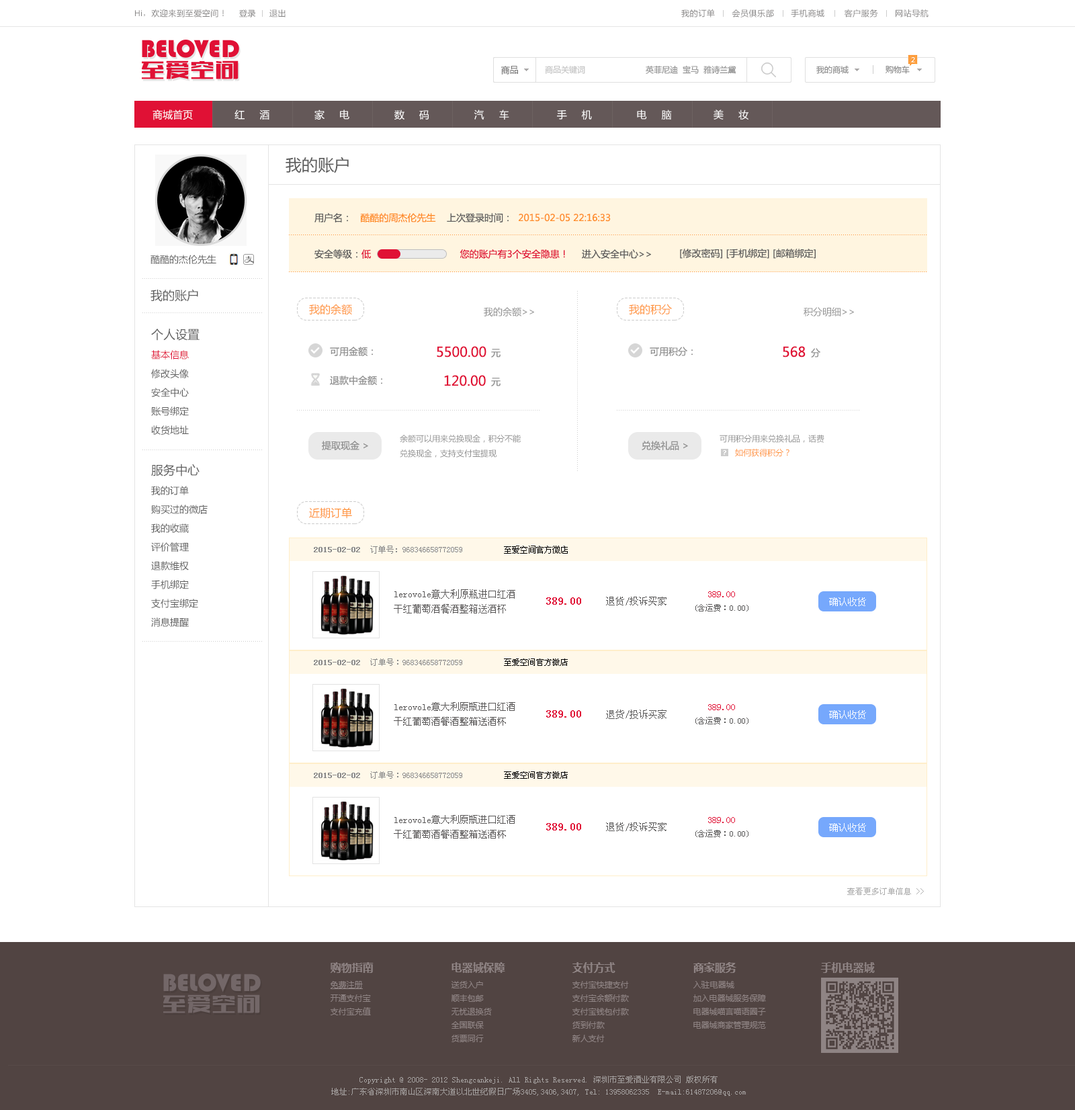
<style>
.page{position:relative;width:1075px;height:1110px;background:#ffffff}
.page>*{position:absolute;margin:0}
.t1{font:8.1px "MicrosoftYaHei";letter-spacing:0.05em;color:#858484}
.t2{font:8.1px "ArialMT";letter-spacing:0.05em;color:#858484}
.t3{font:8.1px "SimSun";letter-spacing:0.05em;color:#858484}
.t4{font:25.5px "Bauhaus93";color:#e01135}
.t5{font:24.2px "FZCTHJW--GB1-0";letter-spacing:0.025em;color:#e01135}
.t6{font:8.7px "MicrosoftYaHei";color:#7a7979}
.t7{font:8.1px "MicrosoftYaHei";color:#c4c4c4}
.t8{font:8.1px "MicrosoftYaHei";color:#8e8e8e}
.t9{font:10.1px "MicrosoftYaHei";color:#ffffff}
.t10{font:16.1px "MicrosoftYaHei";color:#5d5d5d}
.t11{font:9.4px "MicrosoftYaHei";color:#ff8c26}
.t12{font:9.4px "MicrosoftYaHei";color:#5d5d5d}
.t13{font:9.4px "MicrosoftYaHei";color:#e01135}
.t14{font:12.1px "MicrosoftYaHei";color:#5d5d5d}
.t15{font:10.7px "MicrosoftYaHei";color:#ff9339}
.t16{font:9.4px "MicrosoftYaHei";color:#8f8f8f}
.t17{font:9.4px/18.8px "MicrosoftYaHei";color:#5d5d5d}
.t18{font:12.1px/21.5px "MicrosoftYaHei";color:#5d5d5d}
.t19{font:9.4px/18.8px "MicrosoftYaHei";color:#e01135}
.t20{font:13.4px "MicrosoftYaHei";color:#e01135}
.t21{font:8.1px/14.8px "MicrosoftYaHei";color:#8f8f8f}
.t22{font:8.1px "MicrosoftYaHei";color:#8f8f8f}
.t23{font:8.1px "MicrosoftYaHei";color:#ff9339}
.t24{font:8.1px "SimSun";color:#898989}
.t25{font:8.1px "SimSun";color:#898989;font-weight:bold}
.t26{font:8.1px "SimSun";color:#000000}
.t27{font:9.4px/14.8px "SimSun";color:#585656}
.t28{font:8.1px/14.8px "SimSun";color:#585757}
.t29{font:9.4px/14.8px "SimSun";color:#e01135}
.t30{font:10.7px "SimSun";color:#e01135;font-weight:bold}
.t31{font:9.4px "SimSun";color:#585757}
.t32{font:9.4px "SimSun";color:#ffffff}
.t33{font:8.1px "SimSun";color:#aeaeae}
.t34{font:8.1px/12.1px "SimSun";color:#a4a09f}
</style>
<div class="page">
<p class="t1" style="left:135px;top:9px;width:89px;height:8px"><span class="t2">Hi</span><span class="t3">，</span>欢迎来到至爱空间！</p>
<p class="t1" style="left:239px;top:9px;width:17px;height:8px">登录</p>
<p class="t1" style="left:269px;top:9px;width:16px;height:8px">退出</p>
<p class="t1" style="left:681px;top:9px;width:247px;height:8px">我的订单      会员俱乐部      手机商城       客户服务      网站导航</p>
<p class="t4" style="left:142px;top:40px;width:97px;height:18px">BELOVED</p>
<p class="t5" style="left:142px;top:60px;width:96px;height:19px">至爱空间</p>
<p class="t6" style="left:500px;top:66px;width:18px;height:9px">商品</p>
<p class="t7" style="left:545px;top:65px;width:40px;height:9px">商品关键词</p>
<p class="t8" style="left:645px;top:65px;width:91px;height:9px">英菲尼迪  宝马  雅诗兰黛</p>
<p class="t8" style="left:816px;top:65px;width:32px;height:9px">我的商城</p>
<p class="t8" style="left:885px;top:65px;width:24px;height:9px">购物车</p>
<p class="t9" style="left:152px;top:109px;width:596px;height:11px">商城首页              红     酒               家     电               数     码               汽     车                手     机               电     脑              美     妆</p>
<p class="t10" style="left:285px;top:156px;width:64px;height:17px">我的账户</p>
<p class="t11" style="left:314px;top:213px;width:297px;height:9px"><span class="t12">用户名：   </span>酷酷的周杰伦先生<span class="t12">    上次登录时间：  </span>2015-02-05 22:16:33</p>
<p class="t12" style="left:150px;top:255px;width:66px;height:9px">酷酷的杰伦先生</p>
<p class="t13" style="left:314px;top:249px;width:251px;height:10px"><span class="t12">安全等级：</span>低                                您的账户有3个安全隐患！</p>
<p class="t12" style="left:582px;top:249px;width:69px;height:10px">进入安全中心&gt;&gt;</p>
<p class="t12" style="left:680px;top:249px;width:135px;height:10px">[修改密码] [手机绑定] [邮箱绑定]</p>
<p class="t14" style="left:150px;top:289px;width:48px;height:13px">我的账户</p>
<p class="t15" style="left:309px;top:304px;width:43px;height:11px">我的余额</p>
<p class="t15" style="left:629px;top:304px;width:43px;height:11px">我的积分</p>
<p class="t16" style="left:484px;top:307px;width:50px;height:9px">我的余额&gt;&gt;</p>
<p class="t16" style="left:803px;top:307px;width:51px;height:9px">积分明细&gt;&gt;</p>
<p class="t17" style="left:151px;top:328px;width:48px;height:107px;text-align:justify"><span class="t18">个人设置<br></span><span class="t19">基本信息<br></span>修改头像<br>安全中心<br>账号绑定<br>收货地址</p>
<p class="t16" style="left:330px;top:347px;width:43px;height:10px">可用金额：</p>
<p class="t20" style="left:437px;top:346px;width:49px;height:11px">5500.00</p>
<p class="t16" style="left:491px;top:349px;width:9px;height:8px">元</p>
<p class="t16" style="left:649px;top:347px;width:43px;height:9px">可用积分：</p>
<p class="t20" style="left:782px;top:346px;width:23px;height:11px">568</p>
<p class="t16" style="left:811px;top:348px;width:9px;height:9px">分</p>
<p class="t16" style="left:330px;top:375px;width:52px;height:11px">退款中金额：</p>
<p class="t20" style="left:444px;top:375px;width:42px;height:11px">120.00</p>
<p class="t16" style="left:491px;top:377px;width:9px;height:9px">元</p>
<p class="t21" style="left:400px;top:434px;width:121px;height:23px;text-align:justify">余额可以用来兑换现金，积分不能<br>兑换现金，支持支付宝提现</p>
<p class="t22" style="left:719px;top:434px;width:105px;height:9px">可用积分用来兑换礼品，话费</p>
<p class="t16" style="left:322px;top:441px;width:46px;height:9px">提取现金 &gt;</p>
<p class="t16" style="left:641px;top:441px;width:47px;height:9px">兑换礼品 &gt;</p>
<p class="t23" style="left:735px;top:448px;width:54px;height:9px">如何获得积分？</p>
<p class="t17" style="left:151px;top:463px;width:57px;height:164px;text-align:justify"><span class="t18">服务中心<br></span>我的订单<br>购买过的微店<br>我的收藏<br>评价管理<br>退款维权<br>手机绑定<br>支付宝绑定<br>消息提醒</p>
<p class="t15" style="left:309px;top:507px;width:43px;height:12px">近期订单</p>
<p class="t24" style="left:314px;top:545px;width:148px;height:8px"><span class="t25">2015-02-02  </span>订单号：968346658772059</p>
<p class="t26" style="left:504px;top:545px;width:64px;height:8px">至爱空间官方微店</p>
<p class="t27" style="left:394px;top:589px;width:121px;height:24px;text-align:justify">lerovole意大利原瓶进口红酒<br>干红葡萄酒餐酒整箱送酒杯</p>
<p class="t28" style="left:695px;top:591px;width:53px;height:20px;text-align:center"><span class="t29">389.00<br></span>(含运费：0.00)</p>
<p class="t30" style="left:546px;top:597px;width:35px;height:7px">389.00</p>
<p class="t31" style="left:606px;top:596px;width:60px;height:9px">退货/投诉买家</p>
<p class="t32" style="left:829px;top:597px;width:37px;height:9px">确认收货</p>
<p class="t24" style="left:314px;top:658px;width:148px;height:8px"><span class="t25">2015-02-02  </span>订单号：968346658772059</p>
<p class="t26" style="left:504px;top:658px;width:64px;height:8px">至爱空间官方微店</p>
<p class="t27" style="left:394px;top:702px;width:121px;height:23px;text-align:justify">lerovole意大利原瓶进口红酒<br>干红葡萄酒餐酒整箱送酒杯</p>
<p class="t30" style="left:546px;top:710px;width:35px;height:7px">389.00</p>
<p class="t31" style="left:606px;top:709px;width:60px;height:10px">退货/投诉买家</p>
<p class="t28" style="left:695px;top:704px;width:53px;height:20px;text-align:center"><span class="t29">389.00<br></span>(含运费：0.00)</p>
<p class="t32" style="left:829px;top:710px;width:37px;height:9px">确认收货</p>
<p class="t24" style="left:314px;top:771px;width:148px;height:7px"><span class="t25">2015-02-02  </span>订单号：968346658772059</p>
<p class="t26" style="left:504px;top:771px;width:64px;height:7px">至爱空间官方微店</p>
<p class="t27" style="left:394px;top:815px;width:121px;height:23px;text-align:justify">lerovole意大利原瓶进口红酒<br>干红葡萄酒餐酒整箱送酒杯</p>
<p class="t28" style="left:695px;top:817px;width:53px;height:20px;text-align:center"><span class="t29">389.00<br></span>(含运费：0.00)</p>
<p class="t30" style="left:546px;top:823px;width:35px;height:7px">389.00</p>
<p class="t31" style="left:606px;top:822px;width:60px;height:9px">退货/投诉买家</p>
<p class="t32" style="left:829px;top:823px;width:37px;height:9px">确认收货</p>
<p class="t33" style="left:847px;top:887px;width:77px;height:8px">查看更多订单信息 &gt;&gt;</p>
<p class="t34" style="left:331px;top:1075px;width:415px;height:20px;text-align:center">Copyright @ 2008- 2012 Shengcankeji. All Rights Reserved. 深圳市至爱酒业有限公司 版权所有<br>地址:广东省深圳市南山区深南大道以北世纪假日广场3405,3406,3407, Tel: 13958062335  E-mail:61487206@qq.com</p>
</div>
